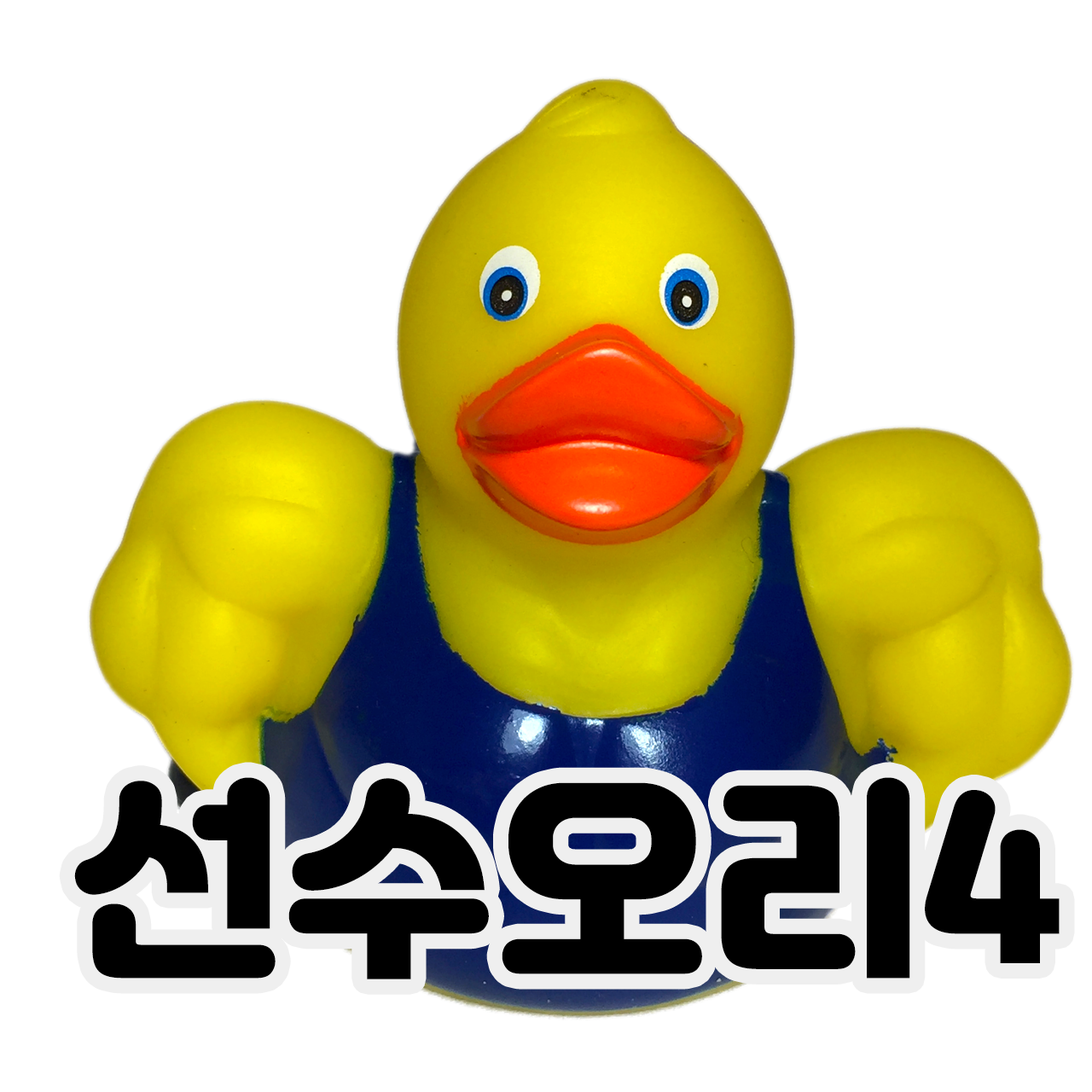
<style>
.page{position:relative;width:1092px;height:1092px;background:#ffffff}
.page>*{position:absolute;margin:0}
.t1{font:213.3px "Jalnan";color:#000000}
</style>
<div class="page">
<p class="t1" style="left:74px;top:777px;width:986px;height:202px">선수오리4</p>
</div>
